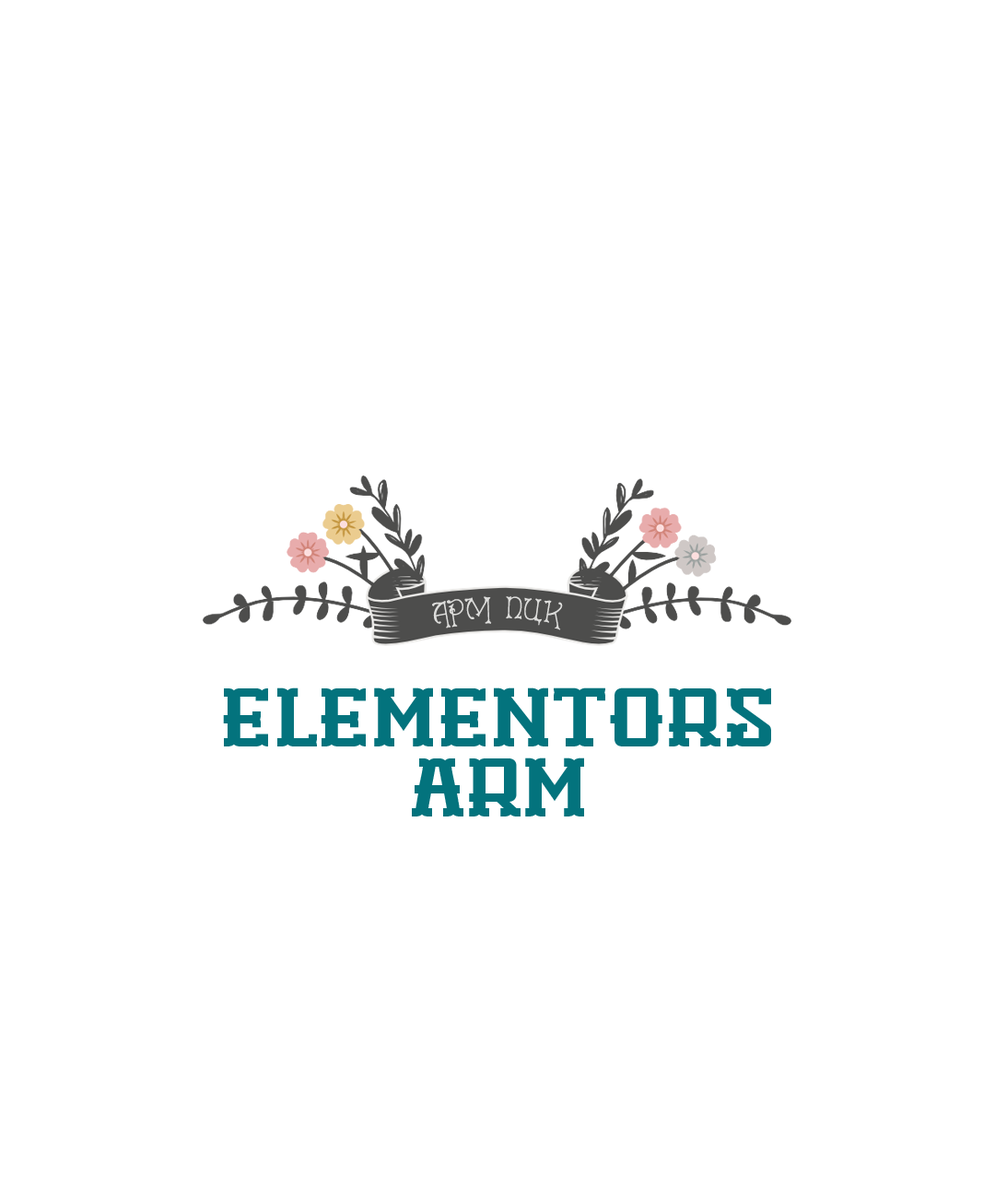
<style>
.page{position:relative;width:995px;height:1198px;background:#ffffff}
.page>*{position:absolute;margin:0}
.t1{font:27.6px "LeGrand";color:#dddddb}
.t2{font:85.6px "Woodshop";color:#03737d}
</style>
<div class="page">
<p class="t1" style="left:432px;top:596px;width:131px;height:34px">АРМ ПЦК</p>
<p class="t2" style="left:223px;top:687px;width:548px;height:59px">Elementors</p>
<p class="t2" style="left:412px;top:758px;width:172px;height:59px">arm</p>
</div>
